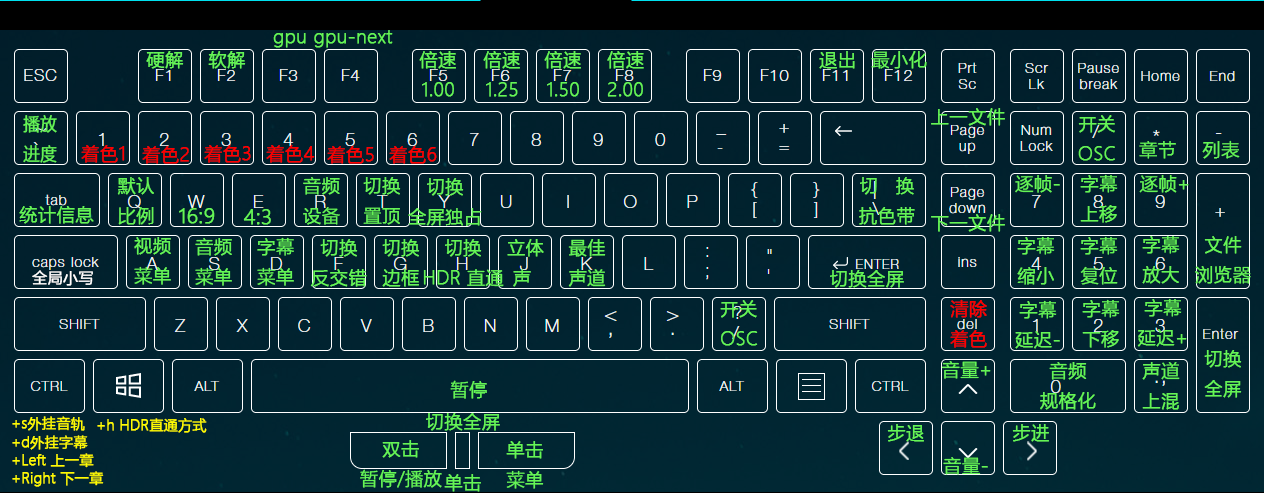
<style>
.page{position:relative;width:1264px;height:493px}
.page>*{position:absolute;margin:0}
.t1{font:18.3px "MicrosoftYaHeiLight";color:#65f556;font-weight:bold}
.t2{font:18.3px/30.4px "MicrosoftYaHeiLight";color:#65f556;font-weight:bold}
.t3{font:18px/30px "MicrosoftYaHeiLight";color:#65f556;font-weight:bold;scale:0.92 1}
.t4{font:18.3px "MicrosoftYaHeiLight";color:#ff0000;font-weight:bold}
.t5{font:18px/30.4px "MicrosoftYaHeiLight";color:#65f556;font-weight:bold}
.t6{font:20px "MicrosoftYaHeiLight";color:#65f556;font-weight:bold}
.t7{font:15px "MicrosoftYaHeiLight";color:#ffffff;font-weight:bold}
.t8{font:18.3px/30.4px "MicrosoftYaHeiLight";color:#ff0000;font-weight:bold}
.t9{font:14px "MicrosoftYaHeiLight";color:#fffc00;font-weight:bold}
.t10{font:14px "MicrosoftYaHeiLight";color:#fffc02;font-weight:bold}
</style>
<div class="page">
<p class="t1" style="left:314px;top:30px;width:79px;height:18px">gpu-next</p>
<p class="t1" style="left:273px;top:33px;width:33px;height:15px">gpu</p>
<p class="t1" style="left:146px;top:51px;width:38px;height:18px">硬解</p>
<p class="t1" style="left:208px;top:51px;width:38px;height:18px">软解</p>
<p class="t2" style="left:419px;top:51px;width:37px;height:46px;text-align:center">倍速<br>1.00</p>
<p class="t2" style="left:483px;top:51px;width:37px;height:46px;text-align:center">倍速<br>1.25</p>
<p class="t2" style="left:544px;top:51px;width:37px;height:46px;text-align:center">倍速<br>1.50</p>
<p class="t2" style="left:607px;top:51px;width:37px;height:46px">倍速<br>2.00</p>
<p class="t1" style="left:819px;top:51px;width:36px;height:18px">退出</p>
<p class="t1" style="left:871px;top:51px;width:56px;height:18px">最小化</p>
<p class="t1" style="left:931px;top:108px;width:74px;height:18px">上一文件</p>
<p class="t3" style="left:23px;top:115px;width:34px;height:48px">播放<br>进度</p>
<p class="t2" style="left:1078px;top:115px;width:37px;height:46px;text-align:center">开关<br>OSC</p>
<p class="t4" style="left:81px;top:145px;width:44px;height:18px">着色1</p>
<p class="t4" style="left:142px;top:146px;width:47px;height:18px">着色2</p>
<p class="t4" style="left:204px;top:145px;width:47px;height:18px">着色3</p>
<p class="t4" style="left:266px;top:145px;width:49px;height:18px">着色4</p>
<p class="t4" style="left:327px;top:146px;width:47px;height:18px">着色5</p>
<p class="t4" style="left:389px;top:146px;width:48px;height:18px">着色6</p>
<p class="t1" style="left:1139px;top:141px;width:37px;height:18px">章节</p>
<p class="t1" style="left:1202px;top:140px;width:38px;height:19px">列表</p>
<p class="t2" style="left:1080px;top:174px;width:38px;height:49px;text-align:center">字幕<br>上移</p>
<p class="t5" style="left:117px;top:177px;width:37px;height:48px;text-align:center">默认<br>比例</p>
<p class="t2" style="left:303px;top:177px;width:37px;height:48px">音频<br>设备</p>
<p class="t2" style="left:363px;top:177px;width:38px;height:48px;text-align:center">切换<br>置顶</p>
<p class="t5" style="left:408px;top:178px;width:74px;height:48px;text-align:center">切换<br>全屏独占</p>
<p class="t2" style="left:859px;top:177px;width:56px;height:48px;text-align:center">切   换<br>抗色带</p>
<p class="t1" style="left:1015px;top:175px;width:45px;height:18px">逐帧-</p>
<p class="t1" style="left:1139px;top:175px;width:50px;height:18px">逐帧+</p>
<p class="t1" style="left:19px;top:206px;width:75px;height:18px">统计信息</p>
<p class="t6" style="left:179px;top:208px;width:36px;height:16px">16:9</p>
<p class="t6" style="left:243px;top:209px;width:28px;height:16px">4:3</p>
<p class="t1" style="left:931px;top:214px;width:74px;height:18px">下一文件</p>
<p class="t2" style="left:134px;top:237px;width:37px;height:48px">视频<br>菜单</p>
<p class="t2" style="left:195px;top:238px;width:37px;height:48px">音频<br>菜单</p>
<p class="t2" style="left:257px;top:237px;width:37px;height:49px">字幕<br>菜单</p>
<p class="t2" style="left:310px;top:239px;width:57px;height:48px;text-align:center">切换<br>反交错</p>
<p class="t2" style="left:382px;top:239px;width:38px;height:48px;text-align:center">切换<br>边框</p>
<p class="t5" style="left:423px;top:239px;width:81px;height:48px;text-align:center">切换<br>HDR 直通</p>
<p class="t5" style="left:507px;top:239px;width:37px;height:48px">立体<br> 声</p>
<p class="t5" style="left:568px;top:239px;width:38px;height:48px;text-align:center">最佳<br>声道</p>
<p class="t2" style="left:1017px;top:236px;width:38px;height:49px;text-align:center">字幕<br>缩小</p>
<p class="t2" style="left:1080px;top:236px;width:38px;height:49px;text-align:center">字幕<br>复位</p>
<p class="t2" style="left:1142px;top:235px;width:38px;height:49px;text-align:center">字幕<br>放大</p>
<p class="t2" style="left:1195px;top:236px;width:56px;height:48px;text-align:center">文件<br>浏览器</p>
<p class="t7" style="left:32px;top:270px;width:61px;height:16px">全局小写</p>
<p class="t1" style="left:830px;top:270px;width:74px;height:18px">切换全屏</p>
<p class="t2" style="left:720px;top:300px;width:38px;height:46px">开关<br>OSC</p>
<p class="t8" style="left:950px;top:299px;width:37px;height:49px">清除<br>着色</p>
<p class="t2" style="left:1015px;top:300px;width:45px;height:49px;text-align:center">字幕<br>延迟-</p>
<p class="t2" style="left:1082px;top:299px;width:38px;height:49px;text-align:center">字幕<br>下移</p>
<p class="t2" style="left:1137px;top:298px;width:50px;height:49px;text-align:center">字幕<br>延迟+</p>
<p class="t2" style="left:1204px;top:350px;width:38px;height:48px;text-align:center">切换<br>全屏</p>
<p class="t1" style="left:941px;top:361px;width:50px;height:18px">音量+</p>
<p class="t2" style="left:1040px;top:362px;width:56px;height:48px;text-align:center">音频<br>规格化</p>
<p class="t2" style="left:1142px;top:362px;width:38px;height:48px;text-align:center">声道<br>上混</p>
<p class="t1" style="left:450px;top:380px;width:37px;height:19px">暂停</p>
<p class="t2" style="left:426px;top:413px;width:74px;height:79px;text-align:center">切换全屏<br><br>单击</p>
<p class="t9" style="left:12px;top:416px;width:73px;height:15px">+s外挂音轨</p>
<p class="t9" style="left:97px;top:418px;width:110px;height:15px">+h HDR直通方式</p>
<p class="t1" style="left:887px;top:424px;width:37px;height:18px">步退</p>
<p class="t1" style="left:1012px;top:424px;width:37px;height:18px">步进</p>
<p class="t10" style="left:12px;top:435px;width:76px;height:15px">+d外挂字幕</p>
<p class="t2" style="left:360px;top:440px;width:82px;height:48px;text-align:center">双击<br>暂停/播放</p>
<p class="t2" style="left:506px;top:441px;width:38px;height:48px;text-align:center">单击<br>菜单</p>
<p class="t9" style="left:12px;top:453px;width:82px;height:15px">+Left 上一章</p>
<p class="t1" style="left:943px;top:457px;width:45px;height:18px">音量-</p>
<p class="t9" style="left:12px;top:471px;width:92px;height:16px">+Right 下一章</p>
</div>
